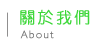
<style>
.page{position:relative;width:100px;height:50px;background:#ffffff}
.page>*{position:absolute;margin:0}
.t1{font:16px "DFYuan-Lt-HK-BF";letter-spacing:0.12em;color:#3ed73a;font-weight:bold}
.t2{font:11px "Humanist521BT-Light";letter-spacing:0.12em;color:#707070;font-weight:bold}
</style>
<div class="page">
<p class="t1" style="left:20px;top:9px;width:70px;height:16px">關於我們</p>
<p class="t2" style="left:20px;top:30px;width:34px;height:9px">About</p>
</div>
